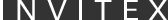
<style>
.page{position:relative;width:168px;height:20px;background:#333333}
.page>*{position:absolute;margin:0}
.t1{font:30.9px "Play-Regular";letter-spacing:0.3em;color:#ffffff}
</style>
<div class="page">
<p class="t1" style="left:0px;top:0px;width:167px;height:20px">INVITEX</p>
</div>
